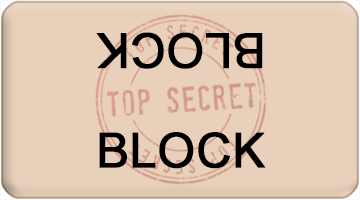
<style>
.page{position:relative;width:360px;height:200px;background:#e8d0bb}
.page>*{position:absolute;margin:0}
.t1{font:48px "ArialMT";color:#000000;font-weight:bold}
</style>
<div class="page">
<p class="t1" style="left:96px;top:32px;width:167px;height:37px;rotate:180deg">BLOCK</p>
<p class="t1" style="left:99px;top:132px;width:167px;height:37px">BLOCK</p>
</div>
